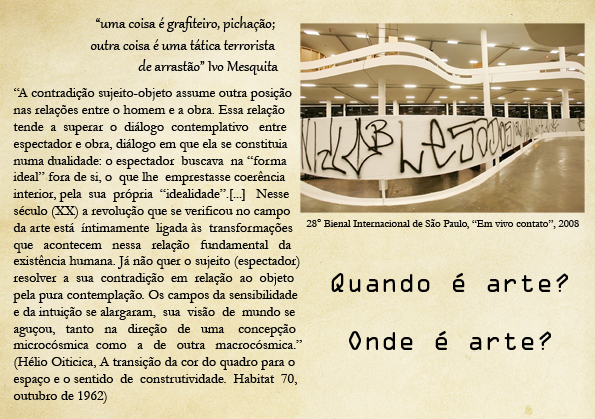
<style>
.page{position:relative;width:595px;height:419px}
.page>*{position:absolute;margin:0}
.t1{font:18px "Gabriola";color:#000000}
.t2{font:14px "Garamond";color:#000000}
.t3{font:11px "Garamond";color:#000000}
.t4{font:11px "TimesNewRomanPSMT";color:#000000}
.t5{font:24px "OCRAStd";color:#000000}
</style>
<div class="page">
<p class="t1" style="left:90px;top:16px;width:189px;height:59px;text-align:right">“uma coisa é grafiteiro, pichação; <br>outra coisa é uma tática terrorista <br>de arrastão” Ivo Mesquita</p>
<p class="t2" style="left:13px;top:88px;width:289px;height:316px">“A contradição sujeito-objeto assume outra posição <br>nas relações entre o homem e a obra. Essa relação <br>tende  a  superar  o  diálogo  contemplativo   entre <br>espectador e obra, diálogo em que ela se constituia<br>numa dualidade: o espectador  buscava  na “forma <br>ideal” fora de si, o  que lhe  emprestasse coerência<br>interior, pela  sua  própria  “idealidade”.[...]   Nesse <br>século (XX) a revolução que se verificou no campo <br>da arte está  íntimamente  ligada às  transformações <br>que   acontecem   nessa   relação   fundamental   da <br>existência humana. Já não quer o sujeito (espectador)<br>resolver  a  sua  contradição  em  relação  ao  objeto<br>pela pura contemplação. Os campos da sensibilidade <br>e da intuição se alargaram,  sua  visão  de  mundo se <br>aguçou,   tanto   na   direção   de   uma    concepção <br>microcósmica  como   a   de   outra   macrocósmica.”<br>(Hélio Oiticica, A transição da cor do quadro para o <br>espaço e o sentido  de  construtividade.  Habitat  70, <br>outubro de 1962)</p>
<p class="t3" style="left:306px;top:219px;width:273px;height:10px">28<span class="t4">°</span> Bienal Internacional de São Paulo, “Em vivo contato”, 2008</p>
<p class="t5" style="left:331px;top:273px;width:237px;height:77px;text-align:center">Quando é arte?<br><br>Onde é arte?</p>
</div>
